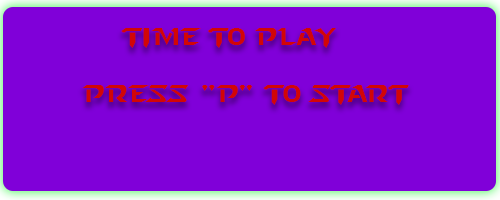
<style>
.page{position:relative;width:500px;height:200px;background:#8000d9}
.page>*{position:absolute;margin:0}
.t1{font:24px "StarcraftNormal";color:#d20606}
</style>
<div class="page">
<p class="t1" style="left:82px;top:28px;width:327px;height:77px">TIME TO PLAY<br>   <br>        Press "P" to start</p>
</div>
